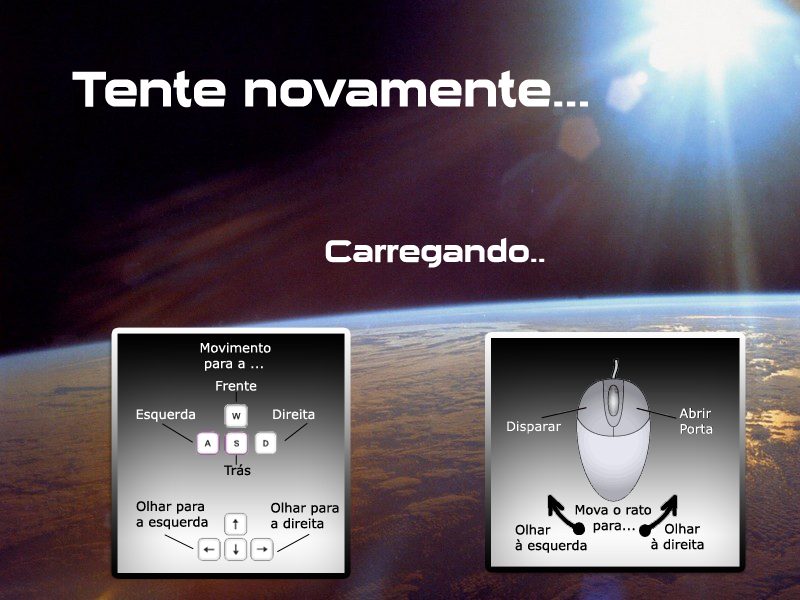
<style>
.page{position:relative;width:800px;height:600px}
.page>*{position:absolute;margin:0}
.t1{font:48px "SuiGeneris";color:#ffffff}
.t2{font:30px "SuiGeneris";color:#ffffff}
.t3{font:13px "Verdana";color:#ffffff}
.t4{font:13px "Verdana";color:#000000}
</style>
<div class="page">
<p class="t1" style="left:72px;top:70px;width:516px;height:38px">Tente novamente...</p>
<p class="t2" style="left:325px;top:237px;width:220px;height:31px">Carregando..</p>
<p class="t3" style="left:200px;top:342px;width:71px;height:29px">Movimento<br> para a ...</p>
<p class="t3" style="left:216px;top:381px;width:41px;height:10px">Frente</p>
<p class="t3" style="left:136px;top:409px;width:59px;height:13px">Esquerda</p>
<p class="t3" style="left:273px;top:409px;width:42px;height:11px">Direita</p>
<p class="t4" style="left:224px;top:464px;width:27px;height:12px">Trás</p>
<p class="t4" style="left:136px;top:501px;width:72px;height:29px">Olhar para<br>a esquerda</p>
<p class="t4" style="left:271px;top:502px;width:68px;height:27px">Olhar para<br>a direita</p>
</div>
